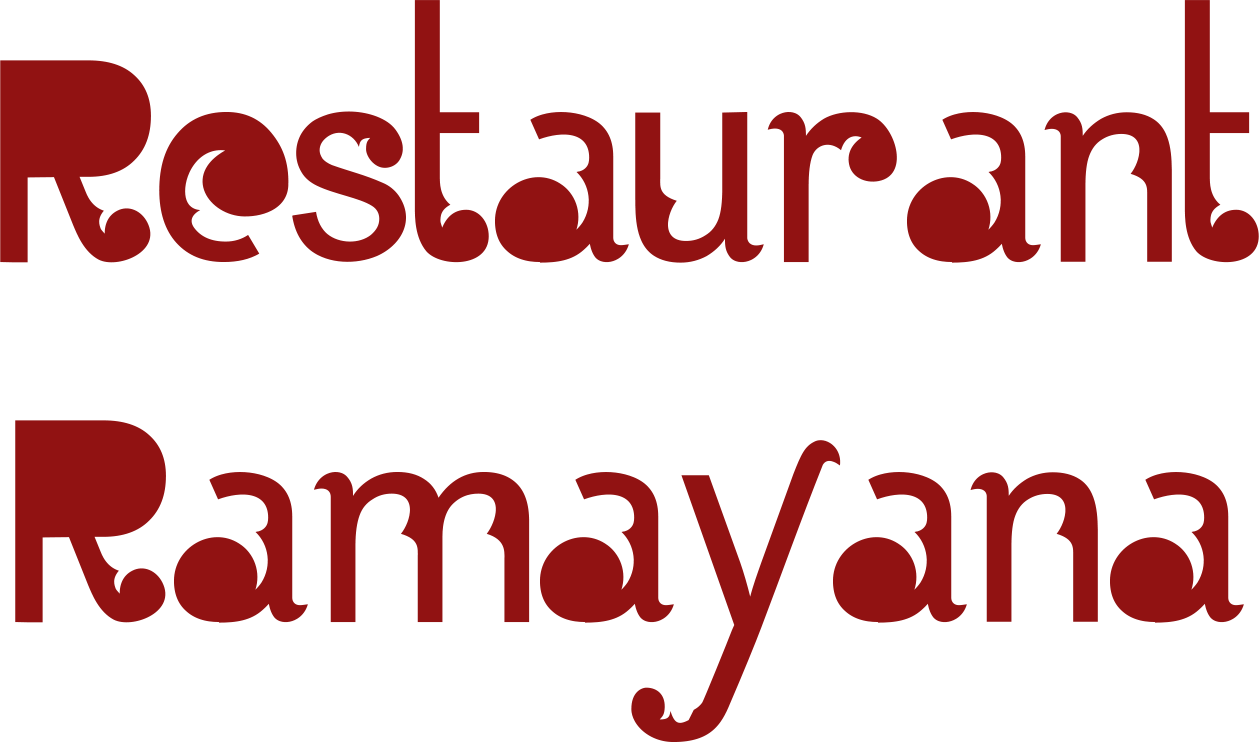
<style>
.page{position:relative;width:1259px;height:742px;background:#ffffff}
.page>*{position:absolute;margin:0}
.t1{font:300px "BatikGangster";color:#911212}
</style>
<div class="page">
<p class="t1" style="left:0px;top:0px;width:1259px;height:742px;text-align:center">Restaurant<br>Ramayana</p>
</div>
